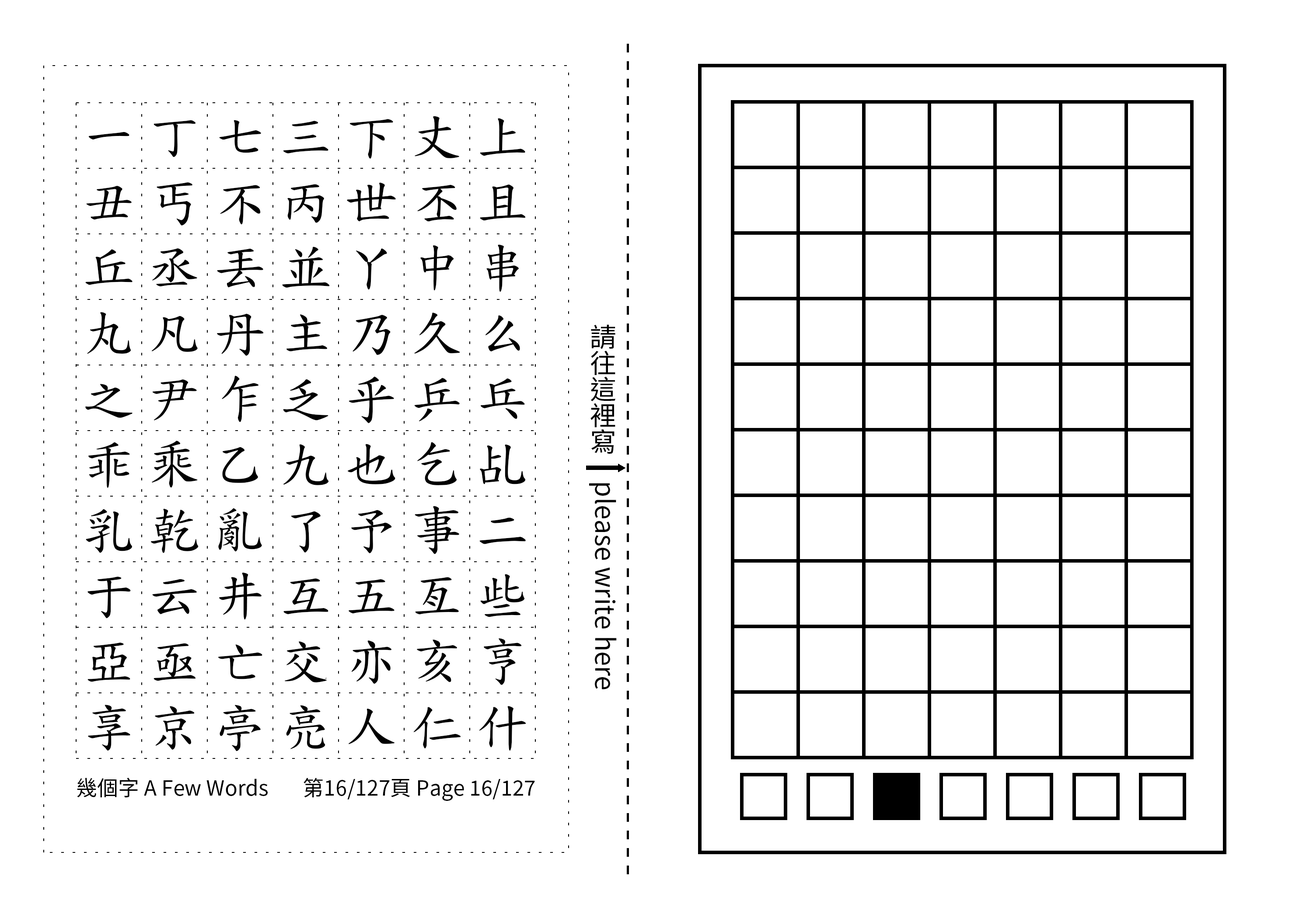
<style>
.page{position:relative;width:1299px;height:918px;background:#ffffff}
.page>*{position:absolute;margin:0}
.t1{font:52.5px/65.6px "TW-Kai-98_1";letter-spacing:0.25em;color:#000000}
.t2{font:26.2px "SourceHanSansTC-Regular";color:#000000}
.t3{font:21px "SourceHanSansTC-Regular";color:#000000}
</style>
<div class="page">
<p class="t1" style="left:85px;top:116px;width:441px;height:636px;text-align:center">一丁七三下丈上丑丐不丙世丕且丘丞丟並丫中串丸凡丹主乃久么之尹乍乏乎乒乓乖乘乙九也乞乩乳乾亂了予事二于云井互五亙些亞亟亡交亦亥亨享京亭亮人仁什</p>
<p class="t2" style="left:589px;top:324px;width:28px;height:366px;text-align:center">請往這裡寫　please write here</p>
<p class="t3" style="left:77px;top:778px;width:191px;height:20px">幾個字 A Few Words</p>
<p class="t3" style="left:303px;top:778px;width:232px;height:23px">第16/127頁 Page 16/127</p>
</div>
